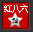
<style>
.page{position:relative;width:33px;height:32px;background:#c50000}
.page>*{position:absolute;margin:0}
.t1{font:10.4px "SimSun";letter-spacing:-0.25em;color:#ffffff}
</style>
<div class="page">
<p class="t1" style="left:4px;top:4px;width:24px;height:9px">红八六</p>
</div>
